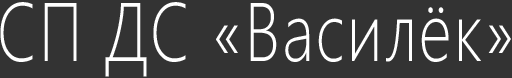
<style>
.page{position:relative;width:512px;height:78px;background:#333333}
.page>*{position:absolute;margin:0}
.t1{font:82.7px "SegoeUI-Light";letter-spacing:0.04em;color:#ffffff;scale:0.77 1}
</style>
<div class="page">
<p class="t1" style="left:0px;top:2px;width:511px;height:75px">СП ДС «Василёк»</p>
</div>
